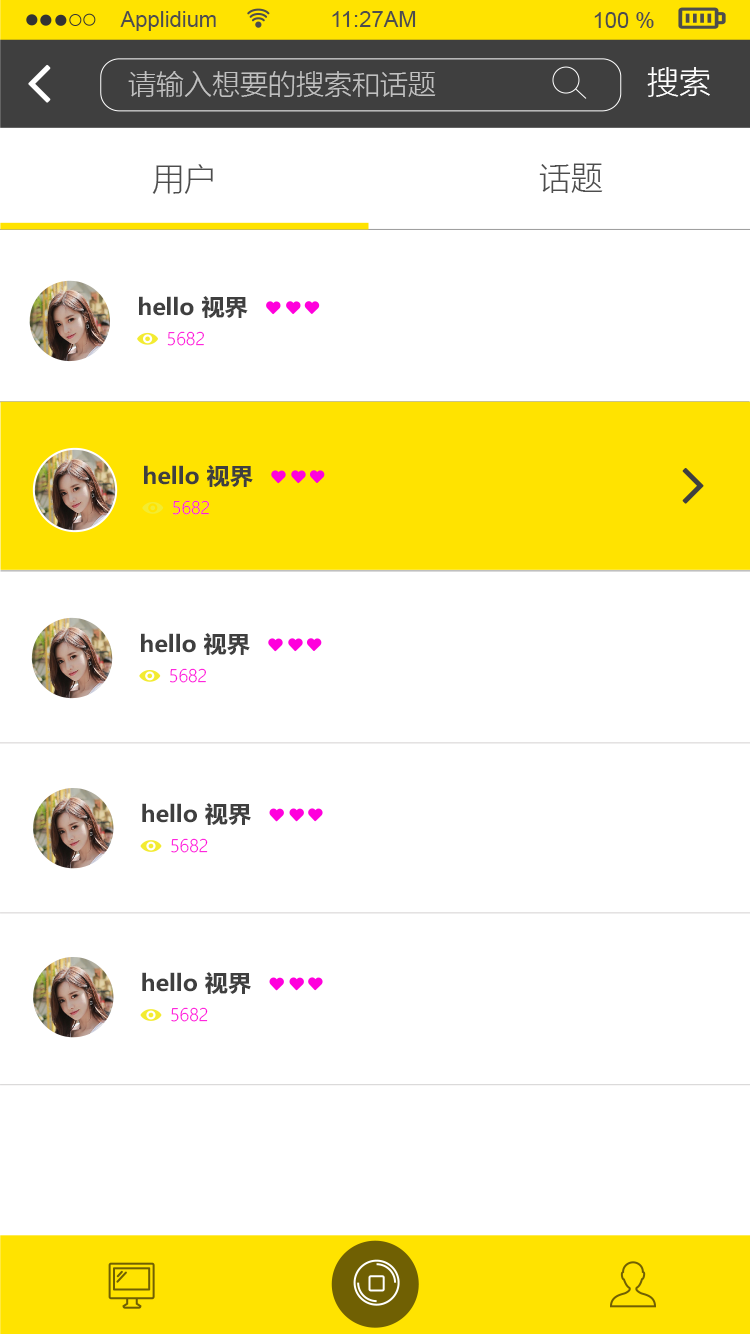
<style>
.page{position:relative;width:750px;height:1334px;background:#ffffff}
.page>*{position:absolute;margin:0}
.t1{font:22px "ArialMT";color:#4d4d4d}
.t2{font:28px "MicrosoftYaHeiLight";color:#c1c1c1}
.t3{font:32px "MicrosoftYaHeiLight";color:#ffffff}
.t4{font:32px "MicrosoftYaHeiLight";color:#4d4d4d}
.t5{font:22.7px "MicrosoftYaHei-Bold";color:#3f3f3f}
.t6{font:17px "MicrosoftYaHeiLight";color:#ff00dc}
</style>
<div class="page">
<p class="t1" style="left:120px;top:11px;width:96px;height:20px">Applidium</p>
<p class="t1" style="left:332px;top:11px;width:84px;height:16px">11:27AM</p>
<p class="t1" style="left:594px;top:12px;width:60px;height:16px">100 %</p>
<p class="t2" style="left:128px;top:71px;width:308px;height:26px">请输入想要的搜索和话题</p>
<p class="t3" style="left:647px;top:67px;width:63px;height:30px">搜索</p>
<p class="t4" style="left:152px;top:164px;width:61px;height:30px">用户</p>
<p class="t4" style="left:539px;top:163px;width:64px;height:30px">话题</p>
<p class="t5" style="left:139px;top:296px;width:109px;height:22px">hello 视界</p>
<p class="t6" style="left:167px;top:331px;width:37px;height:15px">5682</p>
<p class="t5" style="left:144px;top:465px;width:109px;height:22px">hello 视界</p>
<p class="t6" style="left:173px;top:500px;width:36px;height:15px">5682</p>
<p class="t5" style="left:141px;top:633px;width:109px;height:22px">hello 视界</p>
<p class="t6" style="left:170px;top:668px;width:36px;height:15px">5682</p>
<p class="t5" style="left:142px;top:803px;width:109px;height:22px">hello 视界</p>
<p class="t6" style="left:171px;top:838px;width:37px;height:15px">5682</p>
<p class="t5" style="left:142px;top:972px;width:109px;height:22px">hello 视界</p>
<p class="t6" style="left:171px;top:1007px;width:37px;height:15px">5682</p>
</div>
